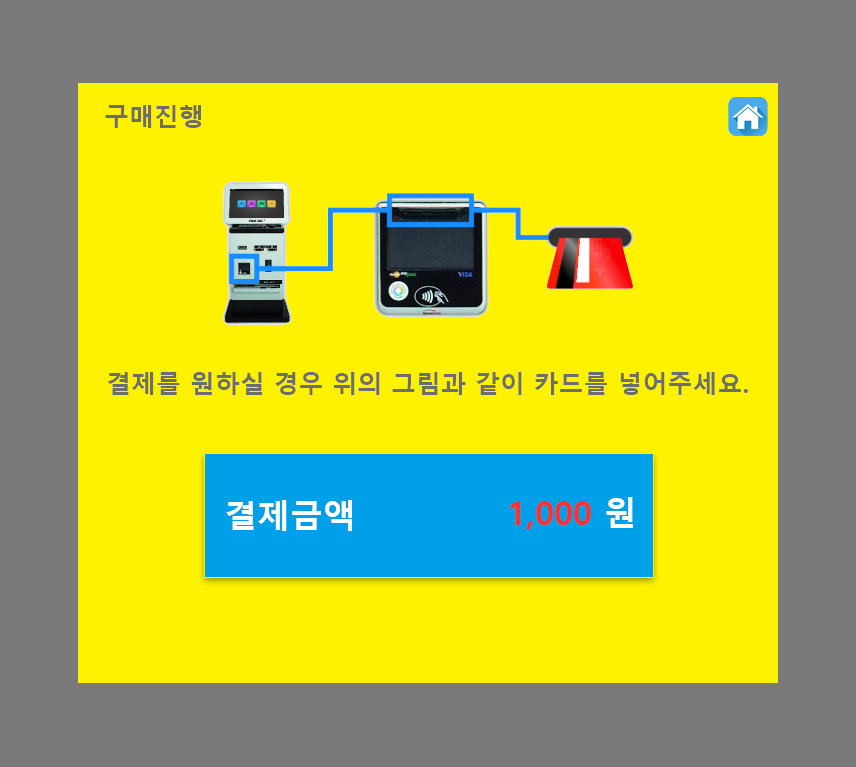
<style>
.page{position:relative;width:856px;height:767px;background:#fff200}
.page>*{position:absolute;margin:0}
.t1{font:25px "MalgunGothicBold";color:#6d6d6d}
.t2{font:33px "MalgunGothicBold";color:#f63232}
.t3{font:33px "MalgunGothicBold";color:#ffffff}
</style>
<div class="page">
<p class="t1" style="left:105px;top:105px;width:97px;height:23px">구매진행</p>
<p class="t1" style="left:107px;top:372px;width:641px;height:23px">결제를 원하실 경우 위의 그림과 같이 카드를 넣어주세요.</p>
<p class="t2" style="left:510px;top:497px;width:123px;height:32px">1,000<span class="t3"> 원</span></p>
<p class="t3" style="left:226px;top:500px;width:126px;height:31px">결제금액</p>
</div>
